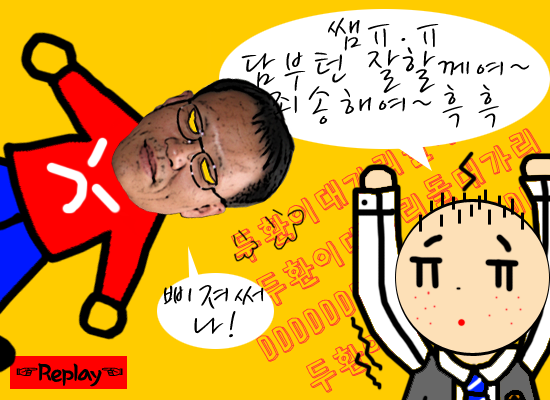
<style>
.page{position:relative;width:550px;height:400px;background:#ffcc00}
.page>*{position:absolute;margin:0}
.t1{font:48px/36px "YDBomnalL";letter-spacing:0.05em;color:#000000}
.t2{font:48px/30px "YDBomnalL";letter-spacing:0.05em;color:#000000}
.t3{font:30px "SachunM";letter-spacing:-0.1em;color:#000000}
</style>
<div class="page">
<p class="t1" style="left:241px;top:17px;width:289px;height:111px;text-align:center">쌤ㅠ.ㅠ<br>담부턴 잘할께여~<br>죄송해여~흑흑</p>
<p class="t2" style="left:164px;top:285px;width:100px;height:53px;text-align:center">삐져써<br>나!</p>
<p class="t3" style="left:16px;top:363px;width:107px;height:24px">☞Replay☜</p>
</div>
